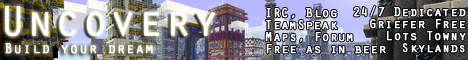
<style>
.page{position:relative;width:468px;height:60px}
.page>*{position:absolute;margin:0}
.t1{font:44px "OratorStd";color:#ffffff;font-weight:bold}
.t2{font:13px/12px "OratorStd";color:#ffffff;font-weight:bold}
.t3{font:15px "OratorStd";color:#ffffff;font-weight:bold}
</style>
<div class="page">
<p class="t1" style="left:5px;top:6px;width:210px;height:31px">Uncovery</p>
<p class="t2" style="left:354px;top:6px;width:112px;height:47px;text-align:right">24/7 Dedicated<br>Griefer Free<br>Lots Towny<br>Skylands</p>
<p class="t2" style="left:265px;top:8px;width:121px;height:46px">IRC, Blog<br>TeamSpeak<br>Maps, Forum<br>Free as in beer</p>
<p class="t3" style="left:5px;top:43px;width:148px;height:11px">Build your dream</p>
</div>
